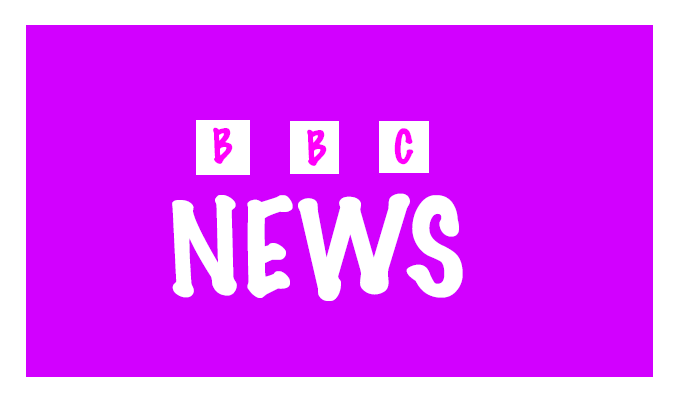
<style>
.page{position:relative;width:678px;height:401px;background:#d200ff}
.page>*{position:absolute;margin:0}
.t1{font:43px "MarkerFelt-Thin";color:#ff00fb}
.t2{font:43px "MarkerFelt-Thin";color:#000000}
.t3{font:120px "MarkerFelt-Thin";color:#ffffff}
</style>
<div class="page">
<p class="t1" style="left:213px;top:127px;width:20px;height:37px"><span class="t2"> </span>B</p>
<p class="t1" style="left:307px;top:129px;width:20px;height:37px"><span class="t2"> </span>B</p>
<p class="t1" style="left:394px;top:128px;width:20px;height:37px"><span class="t2"> </span>C</p>
<p class="t3" style="left:172px;top:193px;width:291px;height:108px">NEWS</p>
</div>
